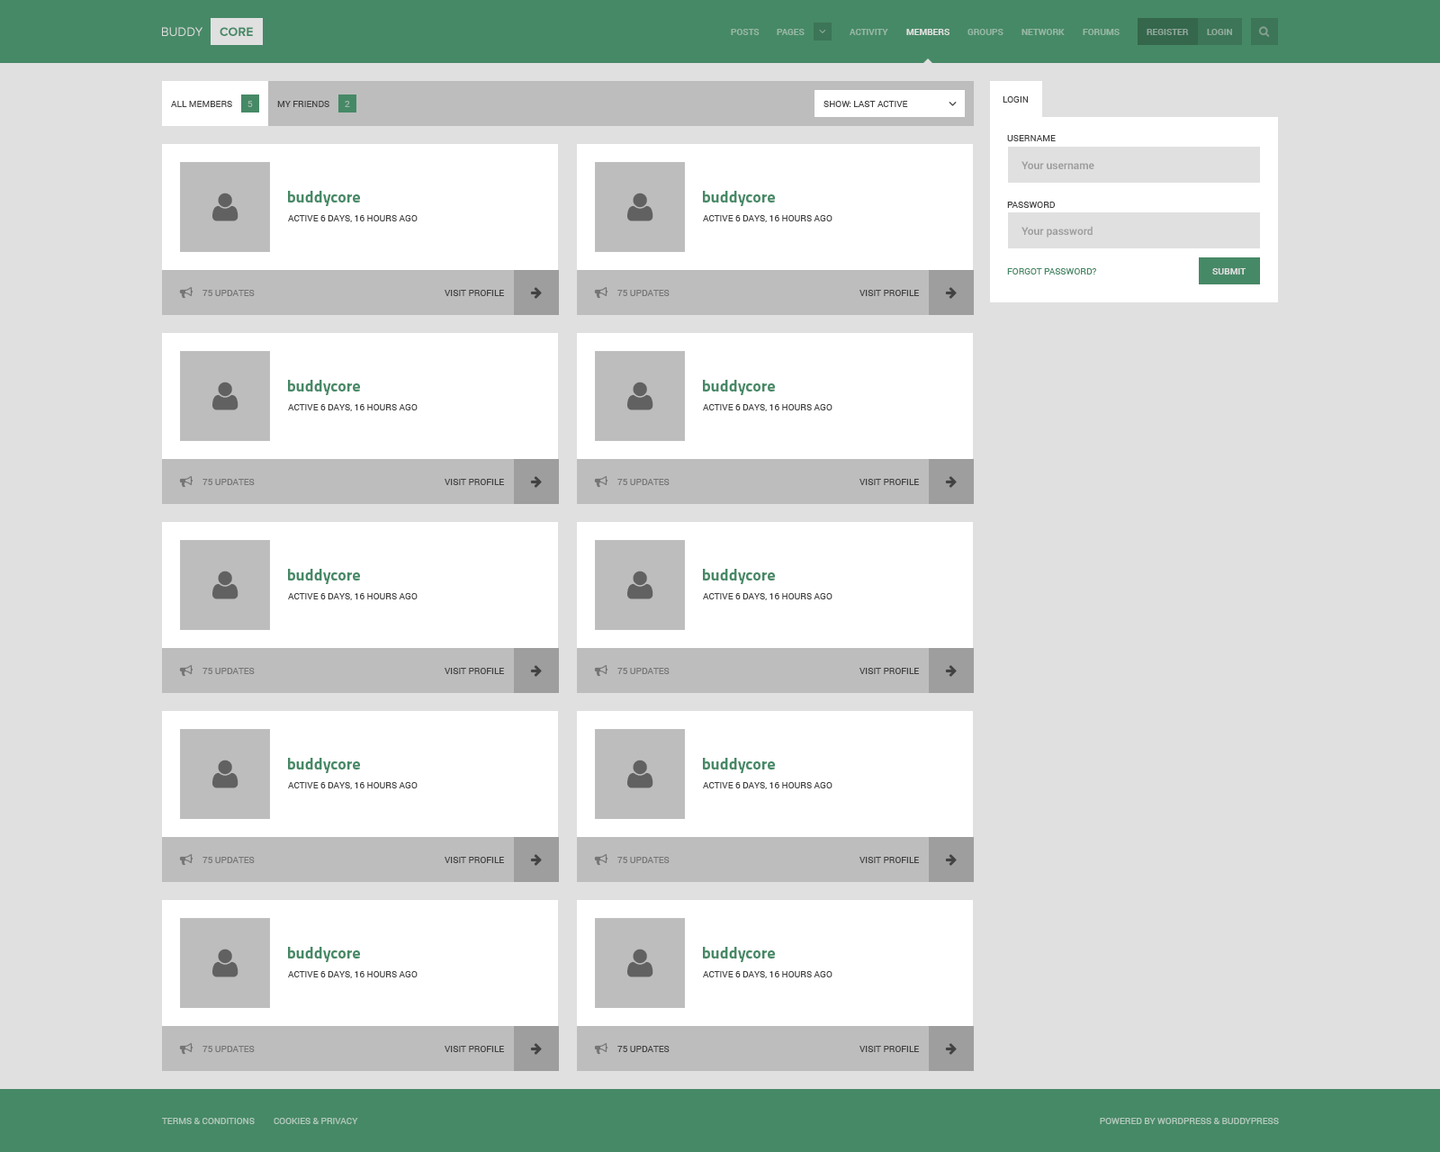
<style>
.page{position:relative;width:1440px;height:1152px;background:#e0e0e0}
.page>*{position:absolute;margin:0}
.t1{font:12.6px "ProximaNova-Regular";color:#e0e0e0;text-transform:uppercase}
.t2{font:12.6px "ProximaNova-Bold";color:#468966;text-transform:uppercase}
.t3{font:9px "Roboto-Bold";color:#97b7a5;text-transform:uppercase}
.t4{font:9px "Roboto-Bold";color:#e0e0e0;text-transform:uppercase}
.t5{font:9px "Roboto-Bold";color:#90a699;text-transform:uppercase}
.t6{font:9px "Roboto-Bold";color:#93ad9e;text-transform:uppercase}
.t7{font:9px "Roboto-Regular";color:#424242;text-transform:uppercase}
.t8{font:9px "Roboto-Regular";color:#9fb8aa;text-transform:uppercase}
.t9{font:10.8px "Roboto-Bold";color:#9e9e9e}
.t10{font:16.2px "Titillium-Bold";color:#468966}
.t11{font:9px "Roboto-Regular";color:#468966;text-transform:uppercase}
.t12{font:9px "Roboto-Regular";color:#757575;text-transform:uppercase}
.t13{font:9px "Roboto-Regular";color:#b2cabd;text-transform:uppercase}
</style>
<div class="page">
<p class="t1" style="left:162px;top:27px;width:40px;height:9px">Buddy</p>
<p class="t2" style="left:220px;top:27px;width:33px;height:9px">Core</p>
<p class="t3" style="left:731px;top:29px;width:29px;height:6px">Posts</p>
<p class="t3" style="left:777px;top:29px;width:28px;height:6px">Pages</p>
<p class="t3" style="left:850px;top:29px;width:38px;height:6px">Activity</p>
<p class="t4" style="left:906px;top:29px;width:44px;height:6px">Members</p>
<p class="t3" style="left:968px;top:29px;width:36px;height:6px">Groups</p>
<p class="t3" style="left:1022px;top:29px;width:43px;height:6px">Network</p>
<p class="t3" style="left:1083px;top:29px;width:37px;height:6px">Forums</p>
<p class="t5" style="left:1147px;top:29px;width:42px;height:6px">Register</p>
<p class="t6" style="left:1207px;top:29px;width:25px;height:6px">Login</p>
<p class="t7" style="left:171px;top:101px;width:61px;height:6px">All members</p>
<p class="t8" style="left:248px;top:101px;width:5px;height:6px">5</p>
<p class="t7" style="left:277px;top:101px;width:52px;height:6px">My friends</p>
<p class="t8" style="left:345px;top:101px;width:5px;height:6px">2</p>
<p class="t7" style="left:824px;top:101px;width:84px;height:6px">Show: Last Active</p>
<p class="t7" style="left:1003px;top:96px;width:26px;height:7px">Login</p>
<p class="t7" style="left:1007px;top:135px;width:49px;height:6px">Username</p>
<p class="t9" style="left:1022px;top:161px;width:72px;height:8px">Your username</p>
<p class="t10" style="left:288px;top:191px;width:72px;height:15px">buddycore</p>
<p class="t10" style="left:703px;top:191px;width:72px;height:15px">buddycore</p>
<p class="t7" style="left:1007px;top:202px;width:48px;height:6px">Password</p>
<p class="t7" style="left:288px;top:215px;width:130px;height:7px">Active 6 days, 16 hours ago</p>
<p class="t7" style="left:703px;top:215px;width:129px;height:7px">Active 6 days, 16 hours ago</p>
<p class="t9" style="left:1022px;top:226px;width:71px;height:12px">Your password</p>
<p class="t11" style="left:1007px;top:268px;width:89px;height:6px">Forgot password?</p>
<p class="t4" style="left:1212px;top:268px;width:34px;height:6px">Submit</p>
<p class="t12" style="left:202px;top:290px;width:53px;height:6px">75 updates</p>
<p class="t7" style="left:445px;top:290px;width:59px;height:6px">Visit Profile</p>
<p class="t12" style="left:617px;top:290px;width:53px;height:6px">75 updates</p>
<p class="t7" style="left:860px;top:290px;width:59px;height:6px">Visit Profile</p>
<p class="t10" style="left:288px;top:380px;width:72px;height:15px">buddycore</p>
<p class="t10" style="left:703px;top:380px;width:72px;height:15px">buddycore</p>
<p class="t7" style="left:288px;top:404px;width:130px;height:7px">Active 6 days, 16 hours ago</p>
<p class="t7" style="left:703px;top:404px;width:129px;height:7px">Active 6 days, 16 hours ago</p>
<p class="t12" style="left:202px;top:479px;width:53px;height:6px">75 updates</p>
<p class="t7" style="left:445px;top:479px;width:59px;height:6px">Visit Profile</p>
<p class="t12" style="left:617px;top:479px;width:53px;height:6px">75 updates</p>
<p class="t7" style="left:860px;top:479px;width:59px;height:6px">Visit Profile</p>
<p class="t10" style="left:288px;top:569px;width:72px;height:15px">buddycore</p>
<p class="t10" style="left:703px;top:569px;width:72px;height:15px">buddycore</p>
<p class="t7" style="left:288px;top:593px;width:130px;height:7px">Active 6 days, 16 hours ago</p>
<p class="t7" style="left:703px;top:593px;width:129px;height:7px">Active 6 days, 16 hours ago</p>
<p class="t12" style="left:202px;top:668px;width:53px;height:6px">75 updates</p>
<p class="t7" style="left:445px;top:668px;width:59px;height:6px">Visit Profile</p>
<p class="t12" style="left:617px;top:668px;width:53px;height:6px">75 updates</p>
<p class="t7" style="left:860px;top:668px;width:59px;height:6px">Visit Profile</p>
<p class="t10" style="left:288px;top:758px;width:72px;height:15px">buddycore</p>
<p class="t10" style="left:703px;top:758px;width:72px;height:15px">buddycore</p>
<p class="t7" style="left:288px;top:782px;width:130px;height:7px">Active 6 days, 16 hours ago</p>
<p class="t7" style="left:703px;top:782px;width:129px;height:7px">Active 6 days, 16 hours ago</p>
<p class="t12" style="left:202px;top:857px;width:53px;height:6px">75 updates</p>
<p class="t7" style="left:445px;top:857px;width:59px;height:6px">Visit Profile</p>
<p class="t12" style="left:617px;top:857px;width:53px;height:6px">75 updates</p>
<p class="t7" style="left:860px;top:857px;width:59px;height:6px">Visit Profile</p>
<p class="t10" style="left:288px;top:947px;width:72px;height:15px">buddycore</p>
<p class="t10" style="left:703px;top:947px;width:72px;height:15px">buddycore</p>
<p class="t7" style="left:288px;top:971px;width:130px;height:7px">Active 6 days, 16 hours ago</p>
<p class="t7" style="left:703px;top:971px;width:129px;height:7px">Active 6 days, 16 hours ago</p>
<p class="t12" style="left:202px;top:1046px;width:53px;height:6px">75 updates</p>
<p class="t7" style="left:445px;top:1046px;width:59px;height:6px">Visit Profile</p>
<p class="t7" style="left:617px;top:1046px;width:53px;height:6px">75 updates</p>
<p class="t7" style="left:860px;top:1046px;width:59px;height:6px">Visit Profile</p>
<p class="t13" style="left:162px;top:1118px;width:93px;height:6px">Terms &amp; Conditions</p>
<p class="t13" style="left:274px;top:1118px;width:84px;height:6px">Cookies &amp; Privacy</p>
<p class="t13" style="left:1100px;top:1118px;width:179px;height:6px">Powered by WordPress &amp; BuddyPress</p>
</div>
